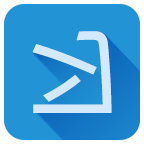
<style>
.page{position:relative;width:144px;height:144px;background:#2294d5}
.page>*{position:absolute;margin:0}
.t1{font:96px "MicrosoftJhengHeiUIBold";color:#d3e9ff}
</style>
<div class="page">
<p class="t1" style="left:32px;top:31px;width:80px;height:82px">习</p>
</div>
